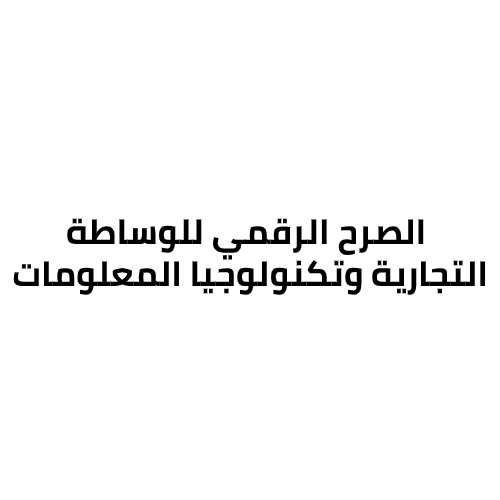
<style>
.page{position:relative;width:500px;height:500px;background:#ffffff}
.page>*{position:absolute;margin:0}
.t1{font:35px "Cairo-Bold";color:#000000}
</style>
<div class="page">
<p class="t1" style="left:13px;top:218px;width:473px;height:77px;text-align:center">الصرح الرقمي للوساطة <br>التجارية وتكنولوجيا المعلومات</p>
</div>
